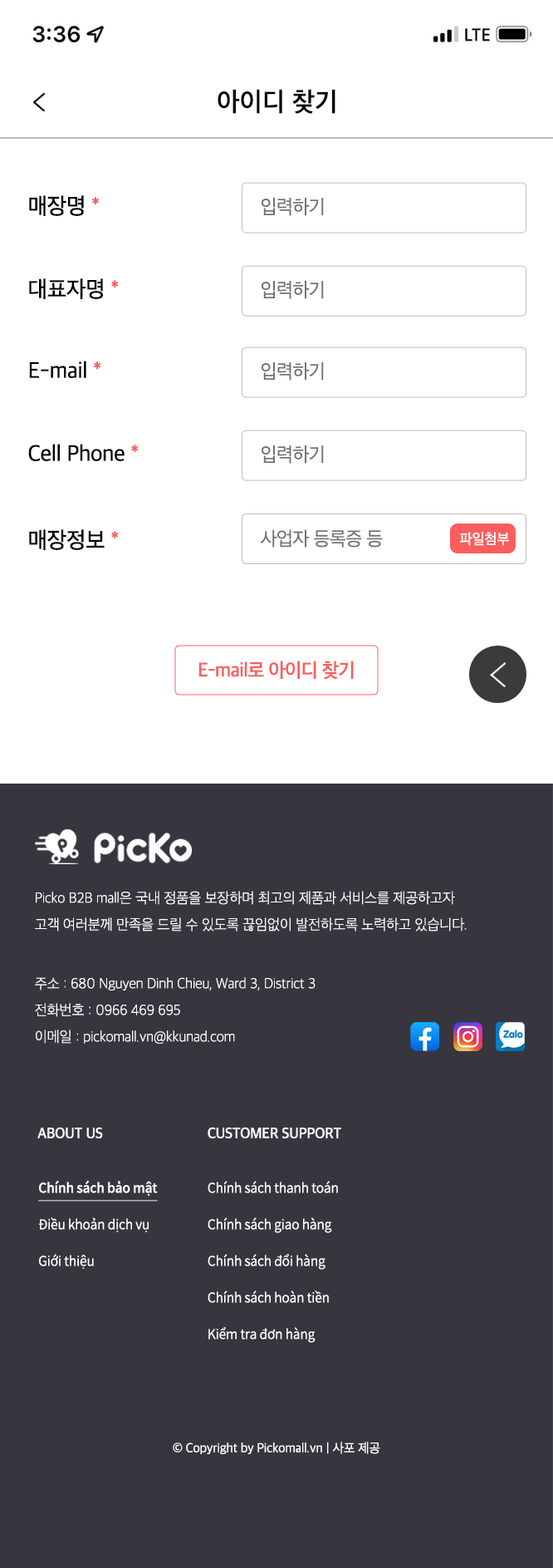
<style>
.page{position:relative;width:553px;height:1568px;background:#ffffff}
.page>*{position:absolute;margin:0}
.t1{font:26.6px "AppleSDGothicNeo-SemiBold";letter-spacing:0.017em;color:#000000}
.t2{font:23.3px "AppleSDGothicNeo-Medium";letter-spacing:-0.01em;color:#000000;scale:0.97 1}
.t3{font:23.3px "AppleSDGothicNeo-Medium";letter-spacing:-0.01em;color:#fa5e5e;scale:0.97 1}
.t4{font:19.9px "AppleSDGothicNeo-Regular";letter-spacing:-0.022em;color:#727272;scale:0.96 1}
.t5{font:15px "AppleSDGothicNeo-Medium";letter-spacing:-0.01em;color:#ffffff;scale:0.97 1}
.t6{font:19.9px "AppleSDGothicNeo-SemiBold";letter-spacing:-0.022em;color:#fa5e5e;scale:0.97 1}
.t7{font:15px/26.6px "AppleSDGothicNeo-UltraLight";letter-spacing:-0.01em;color:#ffffff;scale:0.97 1}
.t8{font:15px "AppleSDGothicNeo-SemiBold";letter-spacing:-0.01em;color:#ffffff;scale:0.97 1}
.t9{font:15px "AppleSDGothicNeo-SemiBold";letter-spacing:-0.01em;color:#ffffff;text-transform:uppercase;scale:0.97 1}
.t10{font:13.3px/36.6px "NotoSansCJKkr-DemiLight";letter-spacing:-0.01em;color:#ffffff;scale:0.97 1}
.t11{font:13.3px/36.6px "NotoSansCJKkr-Medium";letter-spacing:-0.01em;color:#ffffff;text-decoration:underline;scale:0.97 1}
.t12{font:13.3px "AppleSDGothicNeo-Regular";letter-spacing:-0.01em;color:#ffffff;scale:0.97 1}
</style>
<div class="page">
<p class="t1" style="left:218px;top:89px;width:118px;height:25px">아이디 찾기</p>
<p class="t2" style="left:29px;top:195px;width:70px;height:21px">매장명 <span class="t3">*</span></p>
<p class="t4" style="left:262px;top:198px;width:62px;height:18px">입력하기</p>
<p class="t2" style="left:29px;top:278px;width:90px;height:21px">대표자명 <span class="t3">*</span></p>
<p class="t4" style="left:262px;top:281px;width:62px;height:18px">입력하기</p>
<p class="t2" style="left:29px;top:361px;width:72px;height:17px">E-mail <span class="t3">*</span></p>
<p class="t4" style="left:262px;top:362px;width:62px;height:19px">입력하기</p>
<p class="t2" style="left:28px;top:444px;width:111px;height:17px">Cell Phone <span class="t3">*</span></p>
<p class="t4" style="left:262px;top:445px;width:62px;height:19px">입력하기</p>
<p class="t2" style="left:29px;top:529px;width:90px;height:21px">매장정보 <span class="t3">*</span></p>
<p class="t4" style="left:260px;top:529px;width:123px;height:19px">사업자 등록증 등</p>
<p class="t5" style="left:460px;top:532px;width:49px;height:14px">파일첨부</p>
<p class="t6" style="left:199px;top:661px;width:155px;height:19px">E-mail로 아이디 찾기</p>
<p class="t7" style="left:35px;top:891px;width:432px;height:40px">Picko B2B mall은 국내 정품을 보장하며 최고의 제품과 서비스를 제공하고자<br>고객 여러분께 만족을 드릴 수 있도록 끊임없이 발전하도록 노력하고 있습니다.</p>
<p class="t7" style="left:35px;top:977px;width:281px;height:67px">주소 : 680 Nguyen Dinh Chieu, Ward 3, District 3<br>전화번호 : 0966 469 695<br>이메일 : pickomall.vn@kkunad.com</p>
<p class="t8" style="left:37px;top:1127px;width:66px;height:11px">ABOUT US</p>
<p class="t9" style="left:208px;top:1127px;width:134px;height:11px">Customer Support</p>
<p class="t10" style="left:38px;top:1180px;width:120px;height:89px"><span class="t11">Chính sách bảo mật<br></span>Điều khoản dịch vụ<br>Giới thiệu</p>
<p class="t10" style="left:208px;top:1181px;width:130px;height:162px">Chính sách thanh toán<br>Chính sách giao hàng<br>Chính sách đổi hàng<br>Chính sách hoàn tiền<br>Kiểm tra đơn hàng</p>
<p class="t12" style="left:173px;top:1442px;width:208px;height:12px">© Copyright by Pickomall.vn | 사포 제공</p>
</div>
